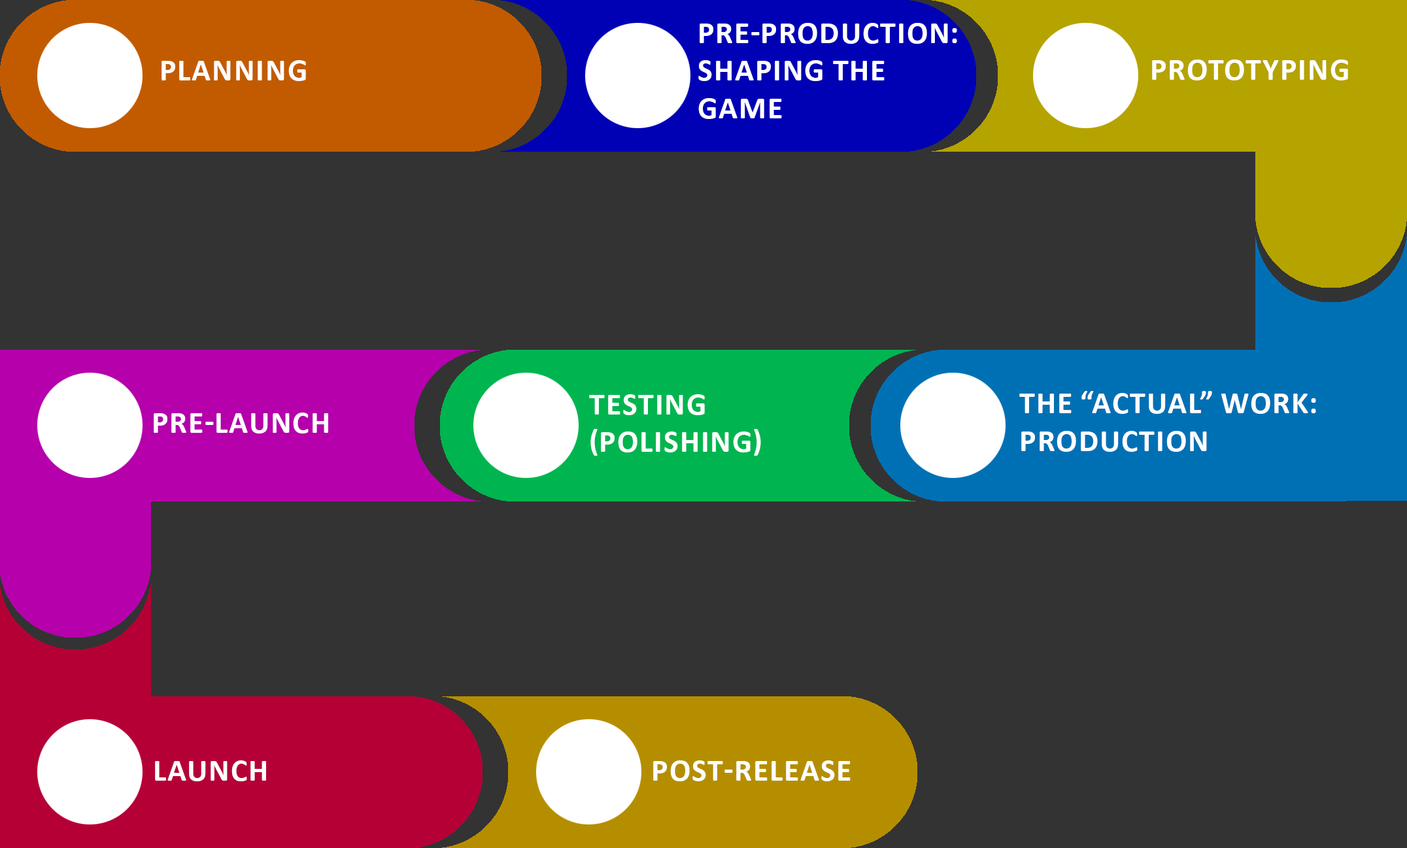
<style>
.page{position:relative;width:1407px;height:848px;background:#333333}
.page>*{position:absolute;margin:0}
.t1{font:31.4px "Calibri-Bold";color:#ffffff;text-transform:uppercase}
</style>
<div class="page">
<p class="t1" style="left:698px;top:23px;width:259px;height:96px">PRE-PRODUCTION: <br>SHAPING THE GAME</p>
<p class="t1" style="left:161px;top:60px;width:145px;height:21px">PLANNING</p>
<p class="t1" style="left:1152px;top:59px;width:196px;height:21px">pROTOTYPING</p>
<p class="t1" style="left:589px;top:394px;width:172px;height:62px">TESTING <br>(POLISHING)</p>
<p class="t1" style="left:1019px;top:391px;width:297px;height:61px">tHE “ACTUAL” WORK:<br>PRODUCTION</p>
<p class="t1" style="left:154px;top:412px;width:174px;height:21px">PRE-LAUNCH</p>
<p class="t1" style="left:155px;top:760px;width:111px;height:21px">LAUNCH</p>
<p class="t1" style="left:653px;top:760px;width:197px;height:21px">POST-RELEASE</p>
</div>
